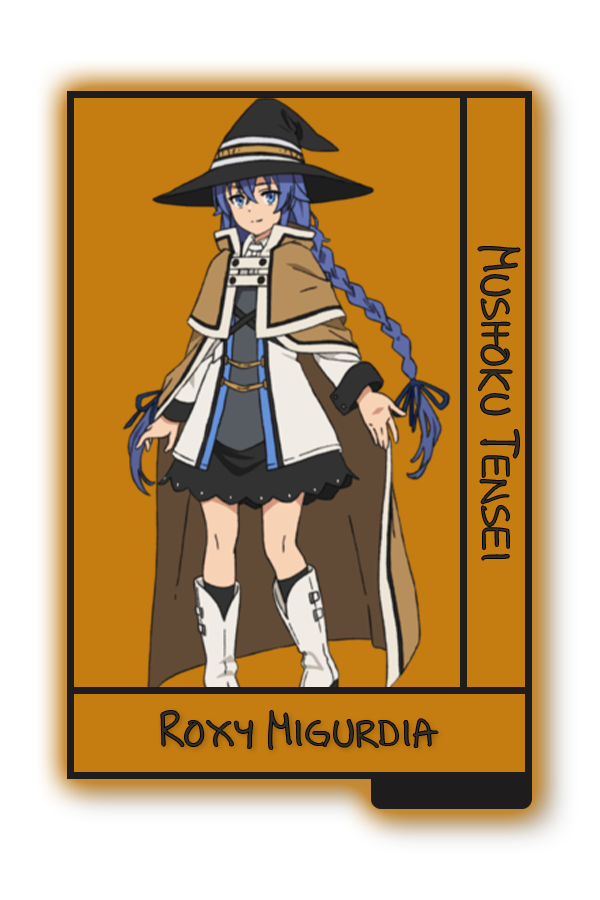
<style>
.page{position:relative;width:600px;height:900px;background:#c57d12}
.page>*{position:absolute;margin:0}
.t1{font:41px "AllCaps";color:#312d2d}
.t2{font:38.3px "AllCaps";color:#312d2d}
</style>
<div class="page">
<p class="t1" style="left:478px;top:247px;width:42px;height:313px;rotate:90deg">Mushoku Tensei</p>
<p class="t2" style="left:161px;top:711px;width:277px;height:38px">Roxy Migurdia</p>
</div>
